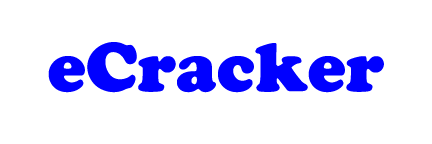
<style>
.page{position:relative;width:432px;height:144px;background:#ffffff}
.page>*{position:absolute;margin:0}
.t1{font:72px "CooperBlack";color:#0000ff}
</style>
<div class="page">
<p class="t1" style="left:48px;top:42px;width:336px;height:51px">eCracker</p>
</div>
